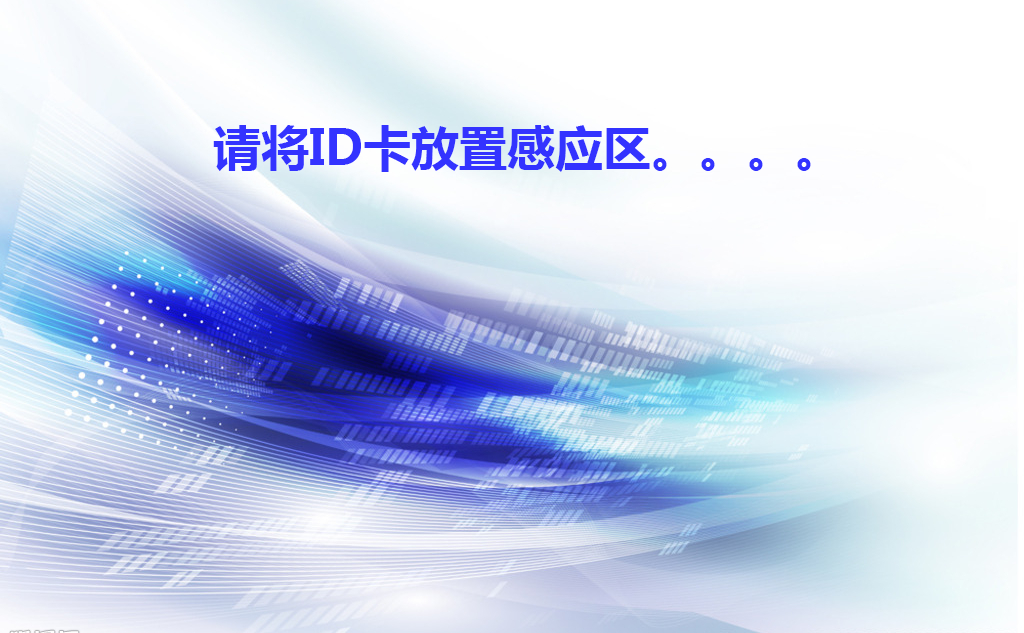
<style>
.page{position:relative;width:1024px;height:633px}
.page>*{position:absolute;margin:0}
.t1{font:48px "MicrosoftYaHei-Bold";color:#3333ff}
</style>
<div class="page">
<p class="t1" style="left:213px;top:125px;width:598px;height:47px">请将ID卡放置感应区。。。。</p>
</div>
